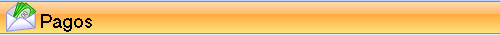
<style>
.page{position:relative;width:500px;height:35px}
.page>*{position:absolute;margin:0}
.t1{font:18px "MS Sans Serif";color:#000000}
</style>
<div class="page">
<p class="t1" style="left:41px;top:14px;width:51px;height:18px">Pagos</p>
</div>
